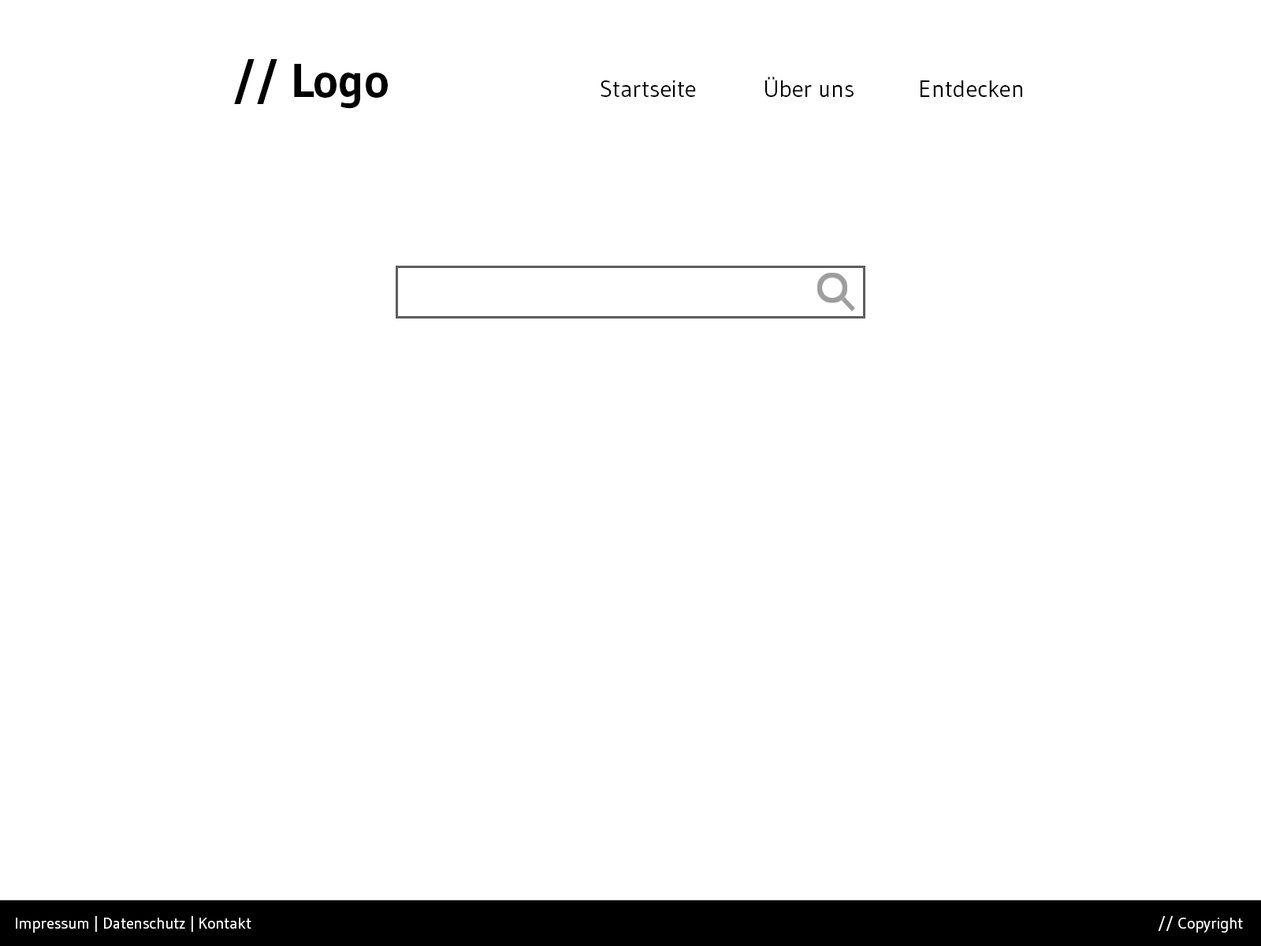
<style>
.page{position:relative;width:1261px;height:946px;background:#ffffff}
.page>*{position:absolute;margin:0}
.t1{font:47.3px "Gudea-Bold";color:#000000}
.t2{font:23.6px "Gudea";color:#000000}
.t3{font:15.8px "Gudea";color:#ffffff}
</style>
<div class="page">
<p class="t1" style="left:234px;top:59px;width:154px;height:50px">// Logo</p>
<p class="t2" style="left:765px;top:76px;width:88px;height:22px">Über uns</p>
<p class="t2" style="left:601px;top:80px;width:95px;height:17px">Startseite</p>
<p class="t2" style="left:920px;top:80px;width:102px;height:17px">Entdecken</p>
<p class="t3" style="left:16px;top:916px;width:235px;height:16px">Impressum | Datenschutz | Kontakt</p>
<p class="t3" style="left:1158px;top:916px;width:85px;height:16px">// Copyright</p>
</div>
